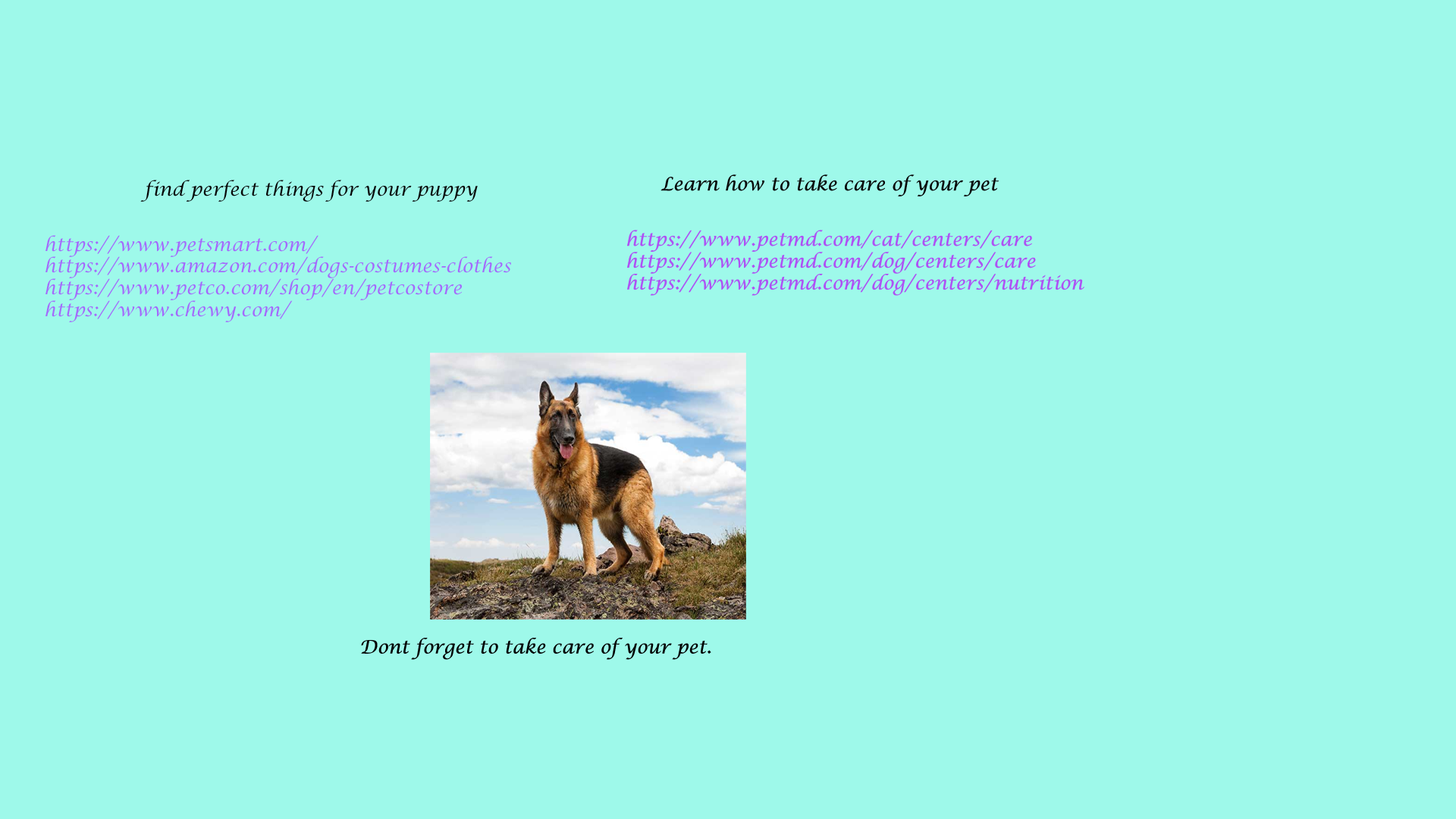
<style>
.page{position:relative;width:1456px;height:819px;background:#9ef9ea}
.page>*{position:absolute;margin:0}
.t1{font:18.2px "LucidaCalligraphy-Italic";color:#060606}
.t2{font:18.2px "LucidaCalligraphy-Italic";color:#040404}
.t3{font:18.2px "LucidaCalligraphy-Italic";color:#080808}
.t4{font:18.2px "LucidaCalligraphy-Italic";color:#ae52f4}
.t5{font:18.2px "LucidaCalligraphy-Italic";color:#a469fc}
.t6{font:18.2px "LucidaCalligraphy-Italic";color:#000000}
</style>
<div class="page">
<p class="t1" style="left:140px;top:180px;width:338px;height:22px"><span class="t2">fin</span>d perfect things for your puppy</p>
<p class="t3" style="left:660px;top:174px;width:339px;height:22px">Learn how to take care of your pet</p>
<p class="t4" style="left:627px;top:230px;width:457px;height:66px">https://www.petmd.com/cat/centers/care<br>https://www.petmd.com/dog/centers/care<br>https://www.petmd.com/dog/centers/nutrition</p>
<p class="t5" style="left:45px;top:235px;width:466px;height:87px">https://www.petsmart.com/<br>https://www.amazon.com/dogs-costumes-clothes<br>https://www.petco.com/shop/en/petcostore<br>https://www.chewy.com/</p>
<p class="t6" style="left:361px;top:638px;width:350px;height:22px">Dont forget to take care of your pet.</p>
</div>
